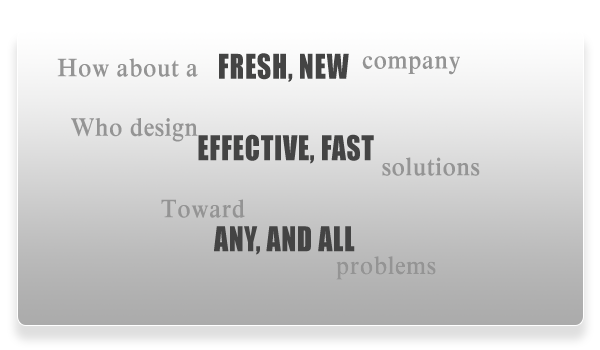
<style>
.page{position:relative;width:600px;height:350px}
.page>*{position:absolute;margin:0}
.t1{font:31.5px "Impact";letter-spacing:0.025em;color:#444444;scale:0.87 1}
.t2{font:26.2px "IskoolaPota-Bold";letter-spacing:0.025em;color:#949494;scale:0.87 1}
</style>
<div class="page">
<p class="t1" style="left:219px;top:53px;width:130px;height:29px">FRESH, NEW</p>
<p class="t2" style="left:57px;top:58px;width:141px;height:19px">How about a</p>
<p class="t2" style="left:362px;top:56px;width:98px;height:19px">company</p>
<p class="t2" style="left:71px;top:118px;width:127px;height:24px">Who design</p>
<p class="t1" style="left:198px;top:134px;width:176px;height:30px">EFFECTIVE, FAST</p>
<p class="t2" style="left:382px;top:157px;width:98px;height:19px">solutions</p>
<p class="t2" style="left:161px;top:199px;width:84px;height:19px">Toward</p>
<p class="t1" style="left:214px;top:226px;width:141px;height:29px">ANY, AND ALL</p>
<p class="t2" style="left:336px;top:256px;width:100px;height:24px">problems</p>
</div>
